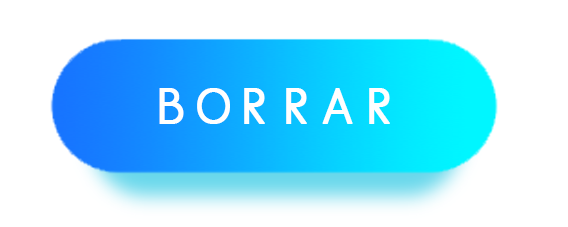
<style>
.page{position:relative;width:568px;height:227px;background:#ffffff}
.page>*{position:absolute;margin:0}
.t1{font:60px "NormafixedTryout";letter-spacing:0.075em;color:#ffffff;font-weight:bold}
</style>
<div class="page">
<p class="t1" style="left:159px;top:88px;width:231px;height:36px">BORRAR</p>
</div>
